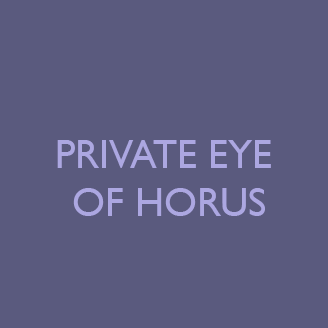
<style>
.page{position:relative;width:328px;height:328px;background:#5a5a7e}
.page>*{position:absolute;margin:0}
.t1{font:40px "GillSansMT";color:#aca7e1;text-transform:uppercase}
</style>
<div class="page">
<p class="t1" style="left:57px;top:140px;width:214px;height:76px;text-align:center">Private Eye <br>of Horus</p>
</div>
